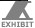
<style>
.page{position:relative;width:35px;height:28px;background:#ffffff}
.page>*{position:absolute;margin:0}
.t1{font:7px "Verdana-Bold";letter-spacing:-0.025em;color:#808080}
</style>
<div class="page">
<p class="t1" style="left:1px;top:21px;width:33px;height:6px">EXHIBIT</p>
</div>
